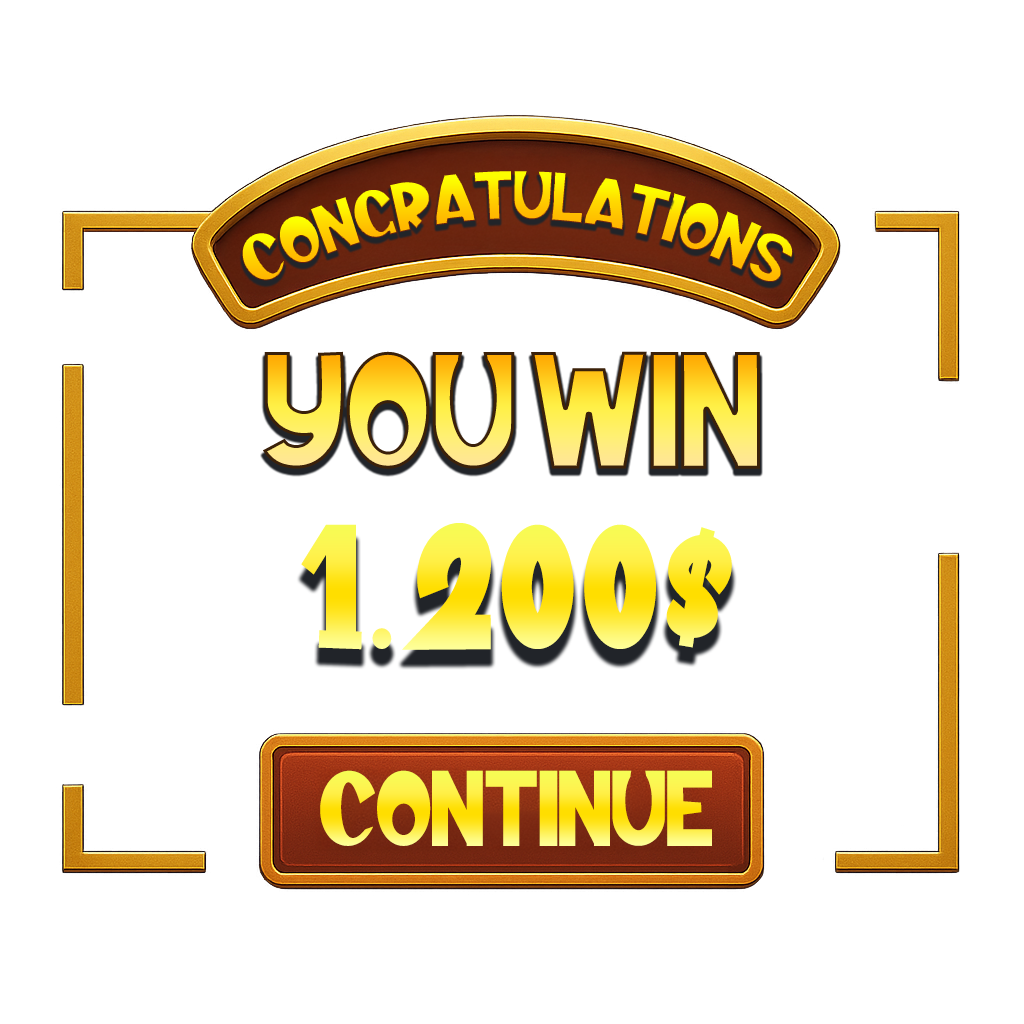
<style>
.page{position:relative;width:1024px;height:1024px;background:#ffffff}
.page>*{position:absolute;margin:0}
.t1{font:143.3px "AlmondMilkRegular";text-transform:uppercase}
.t2{font:150.5px "AlmondMilkRegular";text-transform:uppercase}
.t3{font:92.5px "AlmondMilkRegular";text-transform:uppercase}
</style>
<div class="page">
<p class="t1" style="left:263px;top:351px;width:252px;height:118px">you</p>
<p class="t1" style="left:531px;top:351px;width:229px;height:118px">win</p>
<p class="t2" style="left:301px;top:523px;width:431px;height:127px">1.200$</p>
<p class="t3" style="left:320px;top:770px;width:392px;height:76px">continue</p>
</div>
